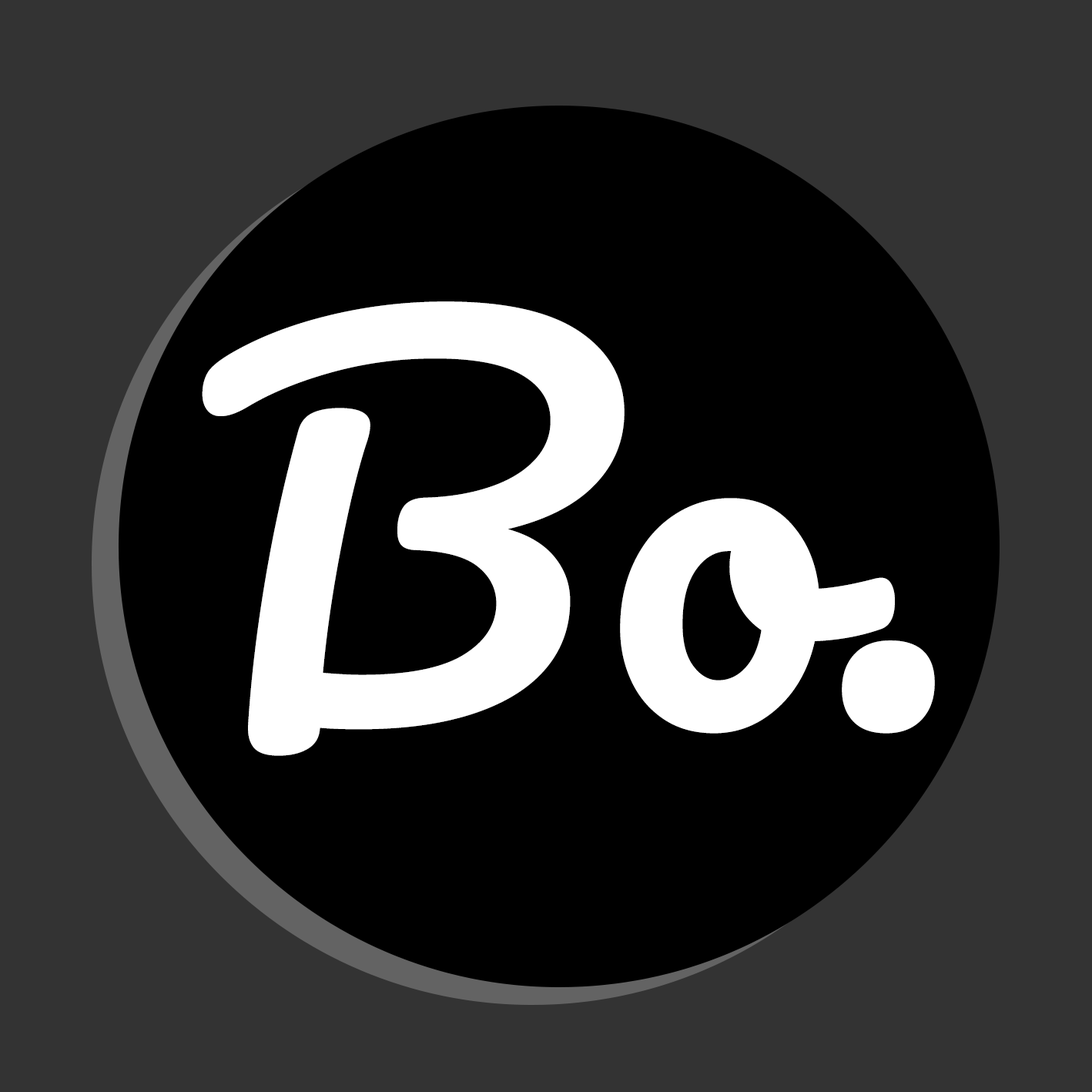
<style>
.page{position:relative;width:1092px;height:1092px;background:#333333}
.page>*{position:absolute;margin:0}
.t1{font:497.5px "Pacifico-Regular";color:#ffffff}
</style>
<div class="page">
<p class="t1" style="left:202px;top:301px;width:733px;height:455px">Bo.</p>
</div>
